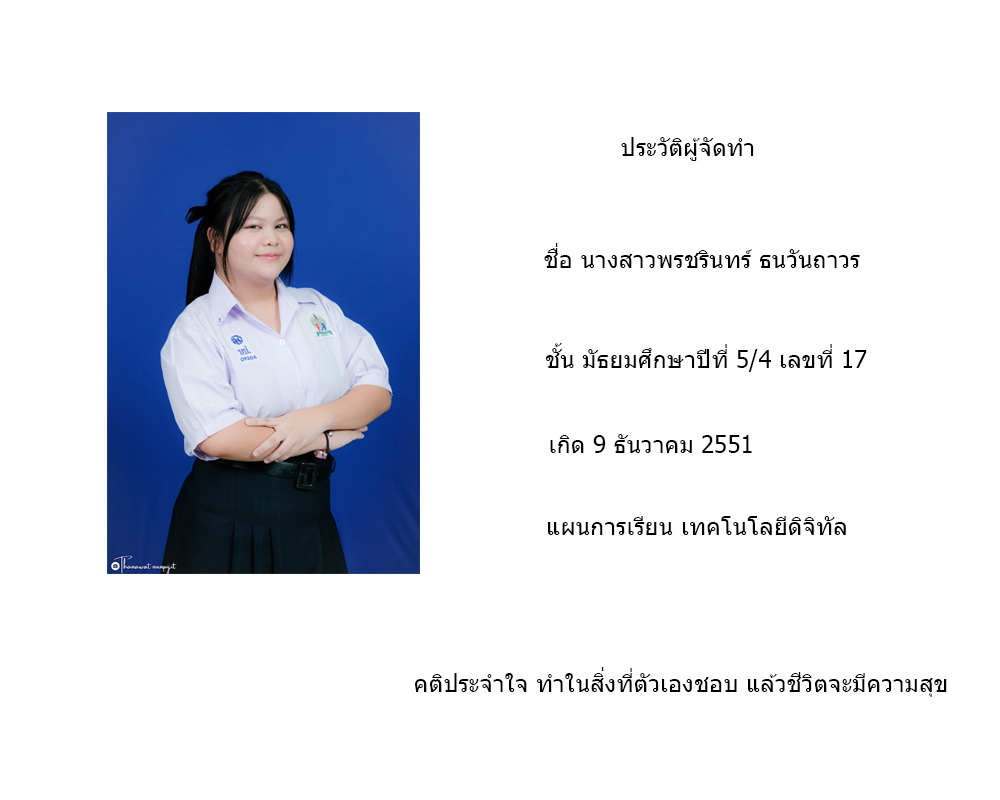
<style>
.page{position:relative;width:1000px;height:800px;background:#ffffff}
.page>*{position:absolute;margin:0}
.t1{font:24px "Tahoma";color:#000000}
</style>
<div class="page">
<p class="t1" style="left:621px;top:137px;width:133px;height:24px">ประวัติผู้จัดทำ</p>
<p class="t1" style="left:544px;top:243px;width:316px;height:25px">ชื่อ นางสาวพรชรินทร์ ธนวันถาวร</p>
<p class="t1" style="left:546px;top:343px;width:321px;height:29px">ชั้น มัธยมศึกษาปีที่ 5/4 เลขที่ 17</p>
<p class="t1" style="left:550px;top:434px;width:202px;height:19px">เกิด 9 ธันวาคม 2551</p>
<p class="t1" style="left:548px;top:516px;width:298px;height:19px">แผนการเรียน เทคโนโลยีดิจิทัล</p>
<p class="t1" style="left:415px;top:667px;width:532px;height:30px">คติประจำใจ ทำในสิ่งที่ตัวเองชอบ แล้วชีวิตจะมีความสุข</p>
</div>
